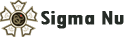
<style>
.page{position:relative;width:132px;height:37px;background:#ffffff}
.page>*{position:absolute;margin:0}
.t1{font:21px "TwCenMT-Condensed";letter-spacing:-0.02em;color:#252b26;font-weight:bold;scale:1.43 1}
</style>
<div class="page">
<p class="t1" style="left:41px;top:11px;width:83px;height:18px">Sigma Nu</p>
</div>
